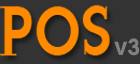
<style>
.page{position:relative;width:140px;height:64px;background:#333333}
.page>*{position:absolute;margin:0}
.t1{font:68.9px "JustOldFashion";color:#ff8a00;scale:0.82 1}
.t2{font:34.3px "WinSoftPro-Bold";color:#828080}
</style>
<div class="page">
<p class="t1" style="left:0px;top:5px;width:110px;height:51px">POS</p>
<p class="t2" style="left:114px;top:38px;width:26px;height:18px">v3</p>
</div>
